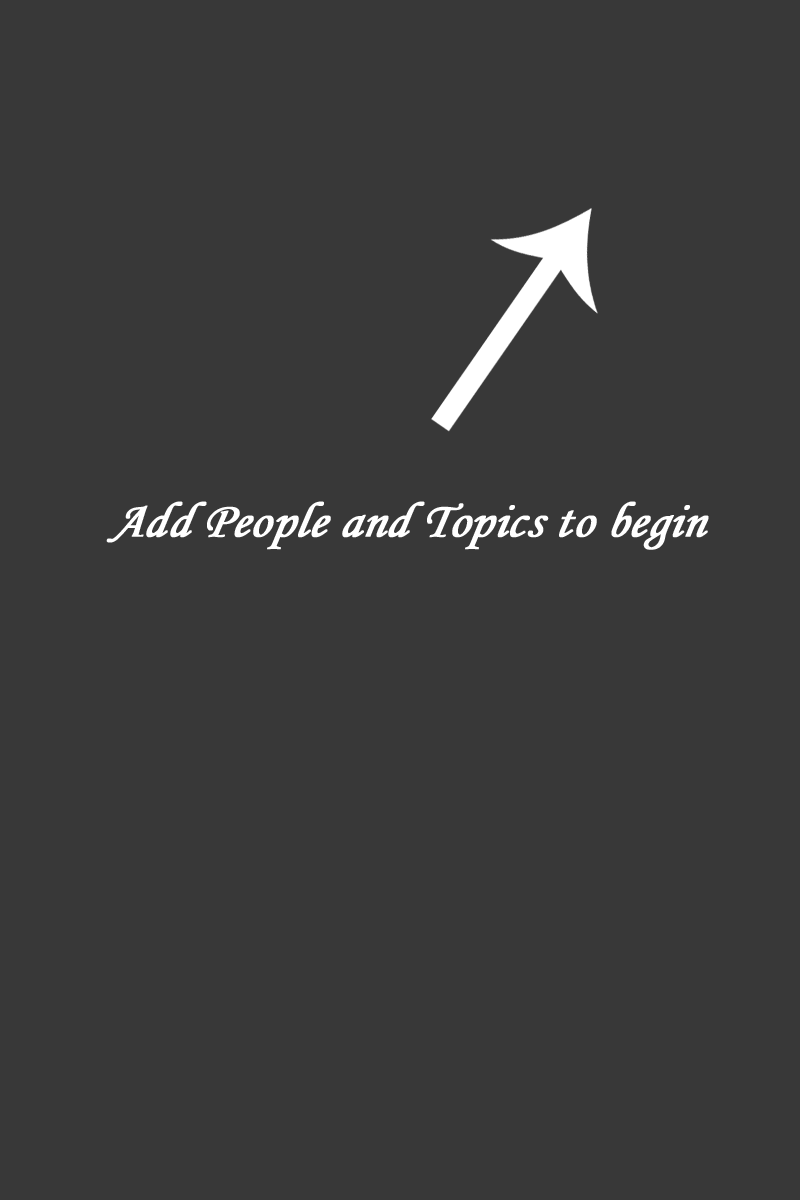
<style>
.page{position:relative;width:800px;height:1200px;background:#383838}
.page>*{position:absolute;margin:0}
.t1{font:50px "MonotypeCorsiva";color:#ffffff;font-weight:bold;font-style:italic}
</style>
<div class="page">
<p class="t1" style="left:106px;top:501px;width:603px;height:49px">Add People and Topics to begin</p>
</div>
